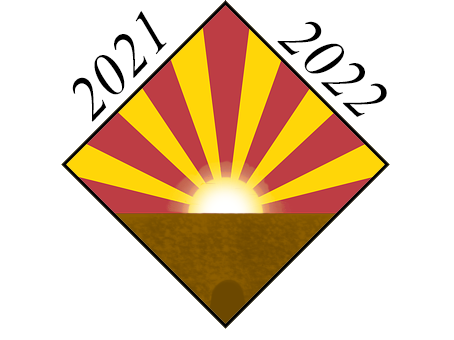
<style>
.page{position:relative;width:454px;height:340px;background:#ffffff}
.page>*{position:absolute;margin:0}
.t1{font:60px "TimesNewRomanPS-ItalicMT";color:#000000}
</style>
<div class="page">
<p class="t1" style="left:72px;top:10px;width:95px;height:112px;rotate:-47deg">2021</p>
<p class="t1" style="left:277px;top:21px;width:110px;height:96px;rotate:-47deg">2022</p>
</div>
